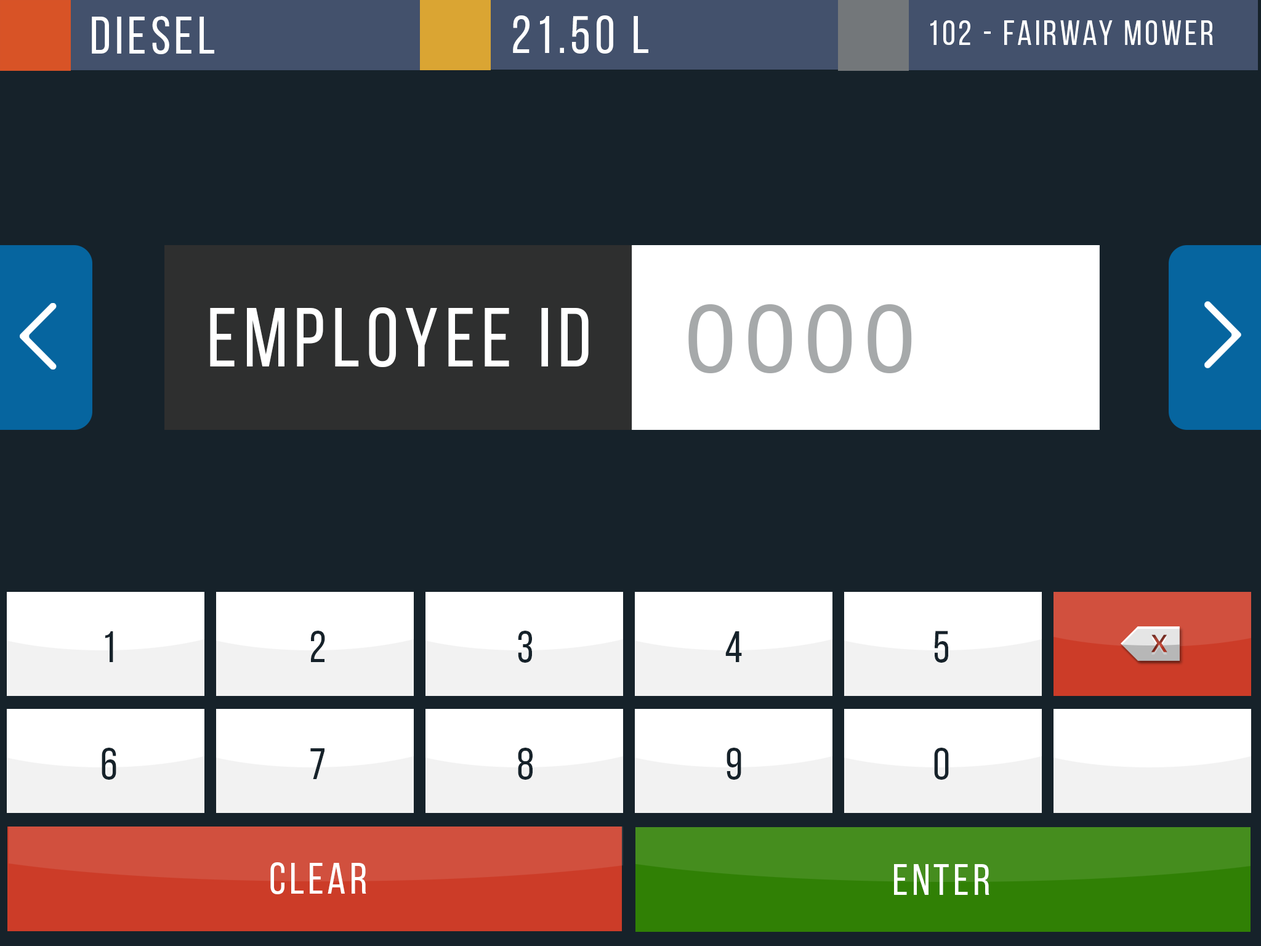
<style>
.page{position:relative;width:1261px;height:946px;background:#16222a}
.page>*{position:absolute;margin:0}
.t1{font:52.6px "BebasNeueRegular";letter-spacing:0.08em;color:#ffffff}
.t2{font:35.1px "BebasNeueRegular";letter-spacing:0.08em;color:#ffffff}
.t3{font:93.3px "ArialMT";letter-spacing:0.08em;color:#a6a9aa}
.t4{font:83.3px "BebasNeueRegular";letter-spacing:0.08em;color:#ffffff}
.t5{font:44.3px "BebasNeueRegular";letter-spacing:0.08em;color:#16222a}
.t6{font:44.3px "BebasNeueRegular";letter-spacing:0.08em;color:#ffffff}
</style>
<div class="page">
<p class="t1" style="left:92px;top:16px;width:122px;height:38px">DIESEL</p>
<p class="t1" style="left:513px;top:15px;width:135px;height:39px">21.50 L</p>
<p class="t2" style="left:930px;top:20px;width:283px;height:25px">102 - Fairway mower</p>
<p class="t3" style="left:688px;top:304px;width:224px;height:69px">0000</p>
<p class="t4" style="left:210px;top:307px;width:379px;height:60px">employee id</p>
<p class="t5" style="left:105px;top:631px;width:8px;height:31px">1</p>
<p class="t5" style="left:311px;top:630px;width:14px;height:32px">2</p>
<p class="t5" style="left:518px;top:630px;width:14px;height:32px">3</p>
<p class="t5" style="left:725px;top:631px;width:17px;height:31px">4</p>
<p class="t5" style="left:935px;top:630px;width:13px;height:32px">5</p>
<p class="t5" style="left:102px;top:747px;width:14px;height:32px">6</p>
<p class="t5" style="left:310px;top:748px;width:14px;height:31px">7</p>
<p class="t5" style="left:518px;top:747px;width:15px;height:32px">8</p>
<p class="t5" style="left:727px;top:747px;width:14px;height:32px">9</p>
<p class="t5" style="left:934px;top:747px;width:15px;height:32px">0</p>
<p class="t6" style="left:270px;top:862px;width:96px;height:32px">clear</p>
<p class="t6" style="left:894px;top:864px;width:95px;height:31px">enter</p>
</div>
